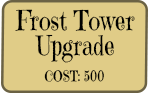
<style>
.page{position:relative;width:150px;height:95px;background:#e0cc87}
.page>*{position:absolute;margin:0}
.t1{font:27.4px/25.3px "EmilysCandy-Regular";color:#000000;scale:0.83 1}
.t2{font:14.5px "EmilysCandy-Regular";color:#000000;scale:0.83 1}
</style>
<div class="page">
<p class="t1" style="left:15px;top:9px;width:120px;height:54px;text-align:center">Frost Tower<br>Upgrade</p>
<p class="t2" style="left:44px;top:69px;width:60px;height:13px">COST: 500</p>
</div>
